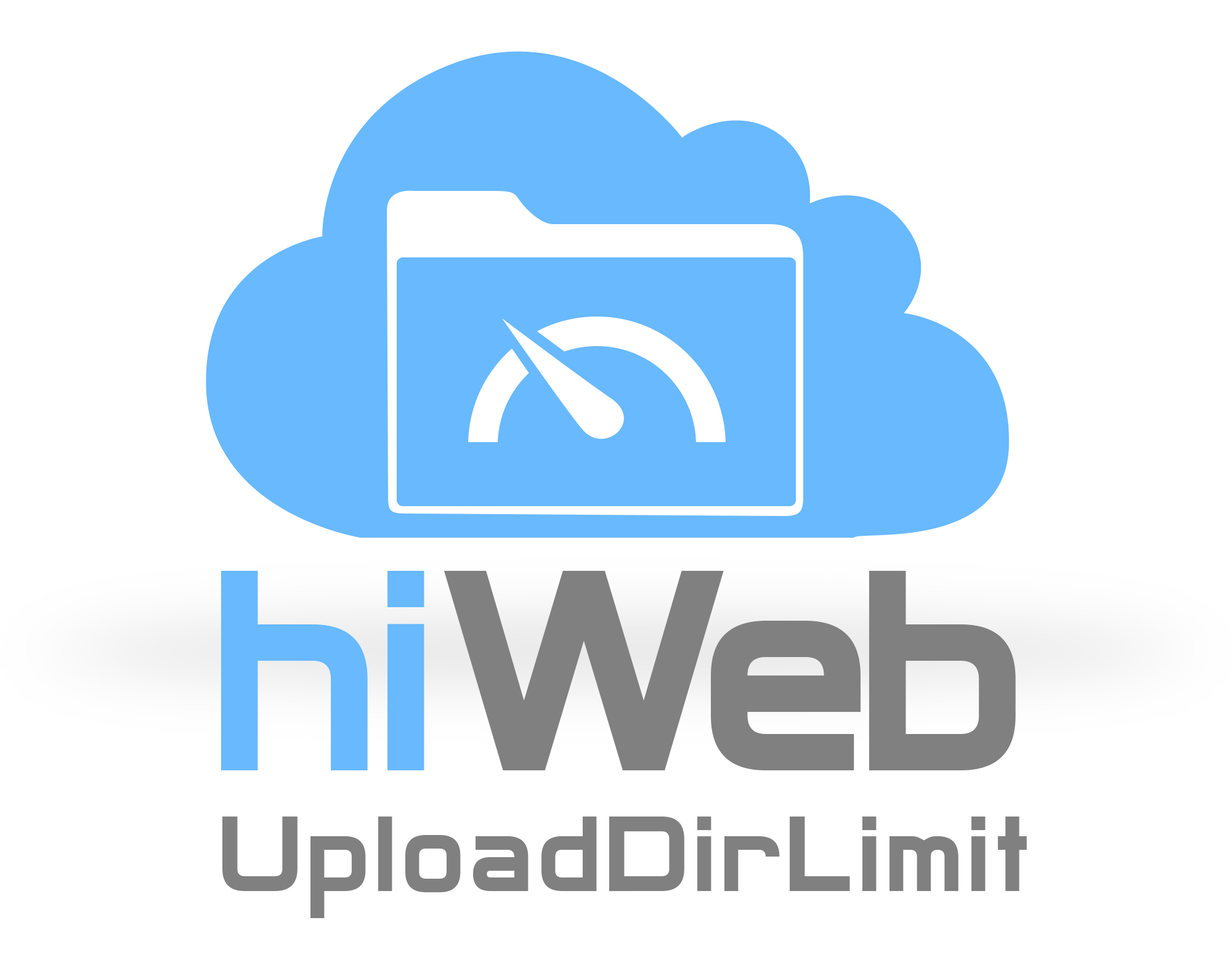
<style>
.page{position:relative;width:1232px;height:968px;background:#ffffff}
.page>*{position:absolute;margin:0}
.t1{font:124.7px/120.6px "Archangelsk";letter-spacing:0.045em;color:#808080}
.t2{font:332.5px/154px "Archangelsk";color:#68b9fd}
.t3{font:332.5px/154px "Archangelsk";color:#808080}
</style>
<div class="page">
<p class="t1" style="left:220px;top:571px;width:807px;height:347px;text-align:center"><span class="t2">hi</span><span class="t3">Web<br></span>UploadDirLimit</p>
</div>
